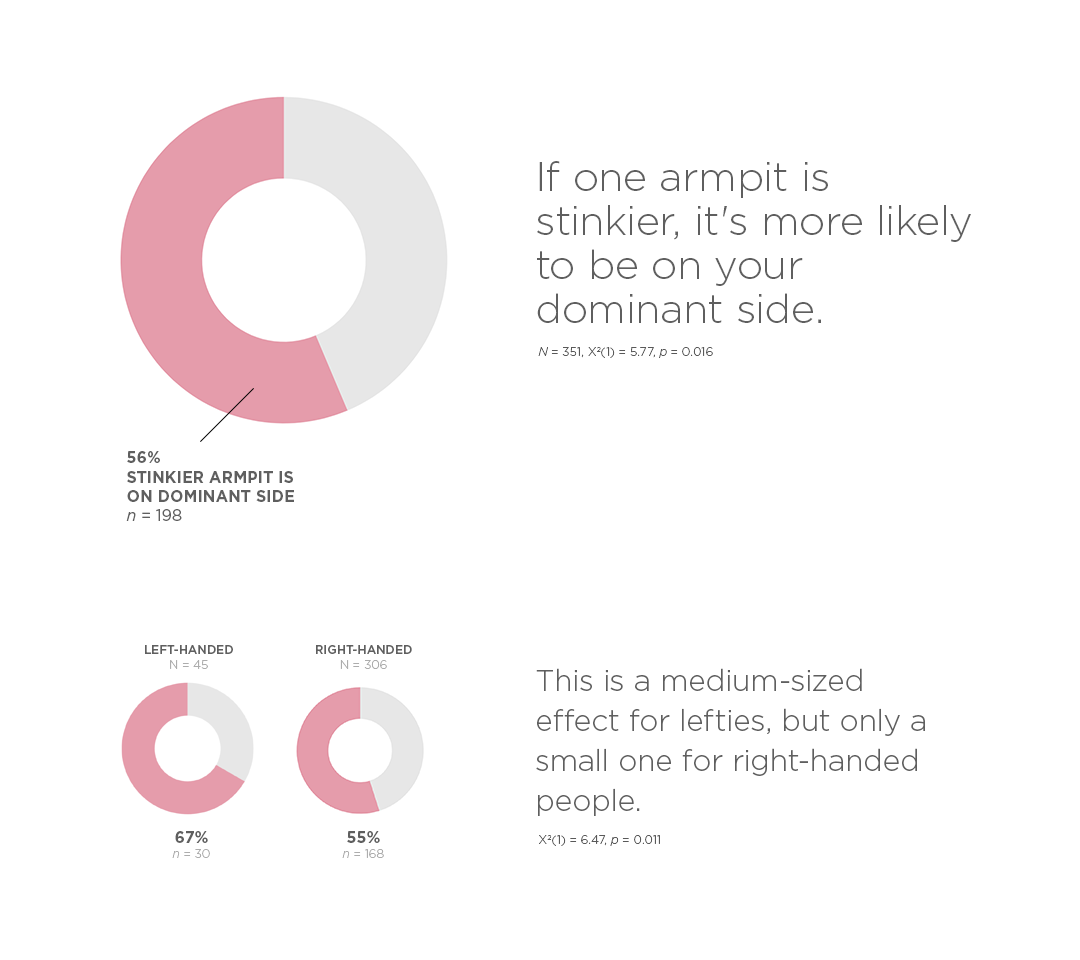
<style>
.page{position:relative;width:1080px;height:960px;background:#ffffff}
.page>*{position:absolute;margin:0}
.t1{font:41px/44px "Gotham-Light";color:#5f5f5f}
.t2{font:12px "Gotham-Light";color:#595959}
.t3{font:12px "Gotham-LightItalic";color:#595959}
.t4{font:16px "Gotham-Bold";color:#5f5f5f}
.t5{font:16px "Gotham-BookItalic";color:#5f5f5f}
.t6{font:16px "Gotham-Book";color:#5f5f5f}
.t7{font:12px "Gotham-Medium";color:#5f5f5f}
.t8{font:12px "Gotham-Light";color:#adadad}
.t9{font:30px/40px "Gotham-Light";color:#5f5f5f}
.t10{font:12px "Gotham-LightItalic";color:#adadad}
</style>
<div class="page">
<p class="t1" style="left:537px;top:161px;width:434px;height:162px;text-align:right">If one armpit is stinkier, it's more likely to be on your dominant side.</p>
<p class="t2" style="left:538px;top:347px;width:175px;height:11px"><span class="t3">N</span> = 351, X2(1) = 5.77, <span class="t3">p</span> = 0.016</p>
<p class="t4" style="left:126px;top:451px;width:168px;height:70px;text-align:right">56%<br>STINKIER ARMPIT IS<br>ON DOMINANT SIDE<br><span class="t5">n</span><span class="t6"> = 198</span></p>
<p class="t7" style="left:145px;top:645px;width:88px;height:24px;text-align:center">LEFT-HANDED<br><span class="t8">N = 45</span></p>
<p class="t7" style="left:316px;top:645px;width:96px;height:24px;text-align:center">RIGHT-HANDED<br><span class="t8">N = 306</span></p>
<p class="t9" style="left:536px;top:668px;width:389px;height:148px;text-align:right">This is a medium-sized effect for lefties, but only a small one for right-handed people.</p>
<p class="t8" style="left:172px;top:831px;width:38px;height:27px;text-align:center"><span class="t4">67%<br></span><span class="t10">n</span> = 30</p>
<p class="t8" style="left:342px;top:831px;width:42px;height:27px;text-align:center"><span class="t4">55%<br></span><span class="t10">n</span> = 168</p>
<p class="t2" style="left:539px;top:835px;width:121px;height:11px">X2(1) = 6.47, <span class="t3">p</span> = 0.011</p>
</div>
